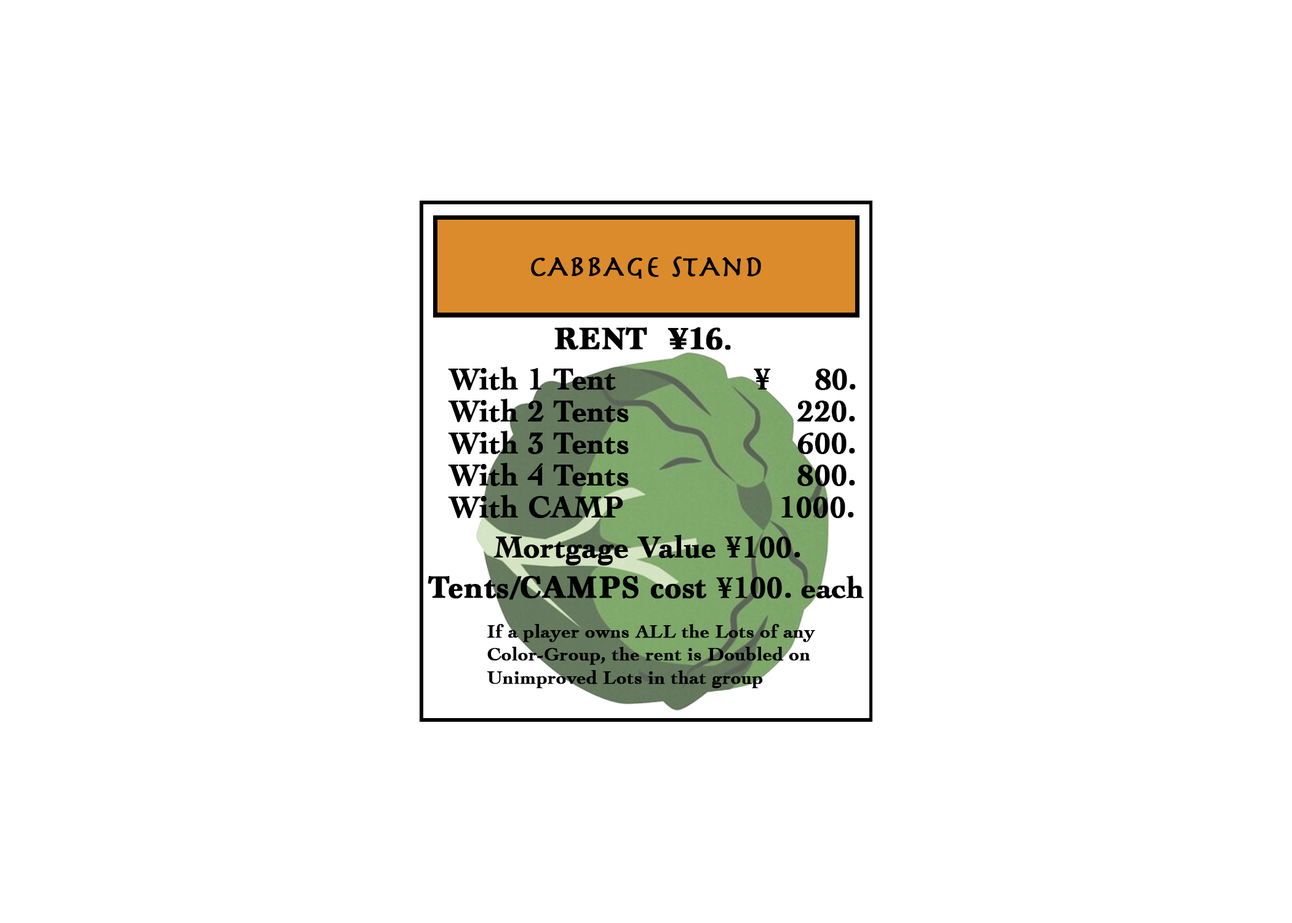
<style>
.page{position:relative;width:1292px;height:923px;background:#ffffff}
.page>*{position:absolute;margin:0}
.t1{font:30.8px "Herculanum";color:#000000;font-weight:bold}
.t2{font:32px "Marion-Bold";color:#000000;font-weight:bold}
.t3{font:30.8px "Cochin-Bold";color:#000000;font-weight:bold}
.t4{font:19.2px "Cochin-Bold";color:#000000;font-weight:bold}
</style>
<div class="page">
<p class="t1" style="left:531px;top:256px;width:230px;height:23px">cAbbAge stAnd</p>
<p class="t2" style="left:554px;top:327px;width:177px;height:23px">RENT  ¥16.</p>
<p class="t3" style="left:448px;top:367px;width:408px;height:23px">With 1 Tent               ¥     80.</p>
<p class="t3" style="left:448px;top:399px;width:407px;height:23px">With 2 Tents                   220.</p>
<p class="t3" style="left:448px;top:431px;width:407px;height:23px">With 3 Tents                   600.</p>
<p class="t3" style="left:448px;top:463px;width:407px;height:23px">With 4 Tents                   800.</p>
<p class="t3" style="left:448px;top:495px;width:406px;height:23px">With CAMP                1000.</p>
<p class="t3" style="left:493px;top:535px;width:307px;height:30px">Mortgage Value ¥100.</p>
<p class="t2" style="left:428px;top:575px;width:436px;height:25px">Tents/CAMPS cost <span class="t3">¥100. each</span></p>
<p class="t4" style="left:487px;top:624px;width:328px;height:64px">If a player owns ALL the Lots of any <br>Color-Group, the rent is Doubled on <br>Unimproved Lots in that group</p>
</div>
